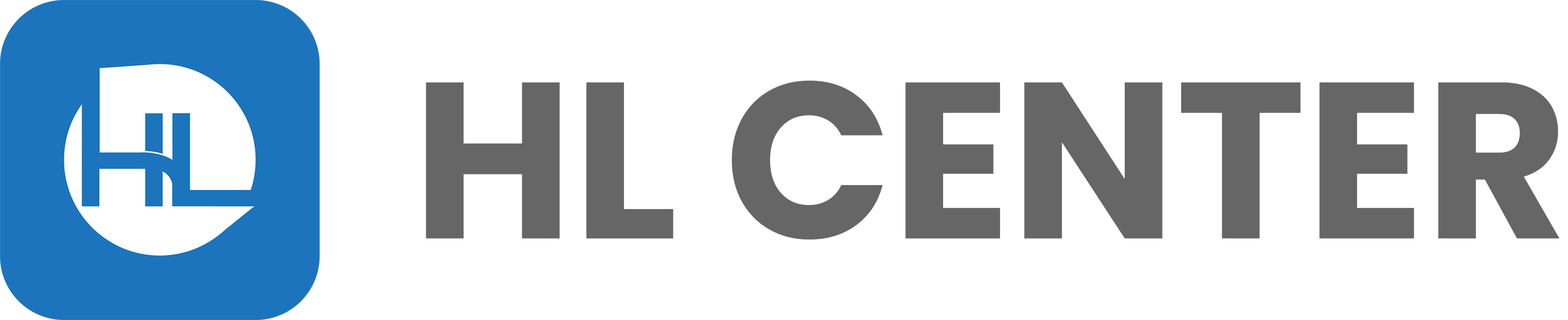
<style>
.page{position:relative;width:1568px;height:320px;background:#ffffff}
.page>*{position:absolute;margin:0}
.t1{font:222px "Poppins-Bold";color:#666666}
</style>
<div class="page">
<p class="t1" style="left:426px;top:80px;width:1133px;height:160px">HL CENTER</p>
</div>
